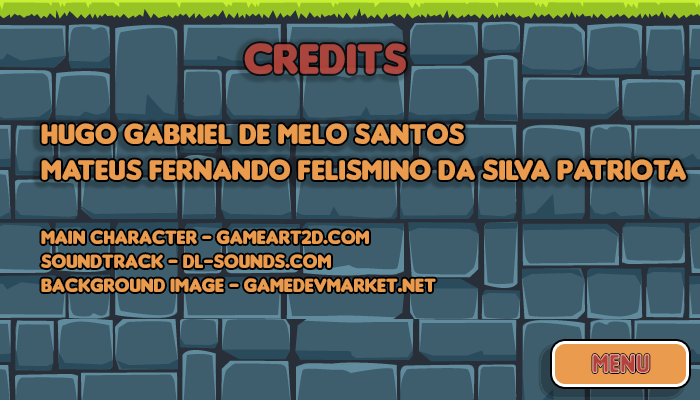
<style>
.page{position:relative;width:700px;height:400px;background:#3e5e6d}
.page>*{position:absolute;margin:0}
.t1{font:45px "Insaniburger";color:#b1433a}
.t2{font:30px "Insaniburger";color:#ea9b4e}
.t3{font:20px "Insaniburger";color:#ea9b4e}
.t4{font:28.6px "Insaniburger";scale:0.86 1}
</style>
<div class="page">
<p class="t1" style="left:244px;top:43px;width:162px;height:32px;opacity:0.93">credits</p>
<p class="t2" style="left:41px;top:123px;width:645px;height:57px">hugo gabriel de melo santos<br>mateus fernando felismino da silva patriota</p>
<p class="t3" style="left:41px;top:230px;width:395px;height:62px">main character - gameart2d.com<br>soundtrack - dl-sounds.com<br>background image - gamedevmarket.net</p>
<p class="t4" style="left:592px;top:354px;width:58px;height:19px">menu</p>
</div>
